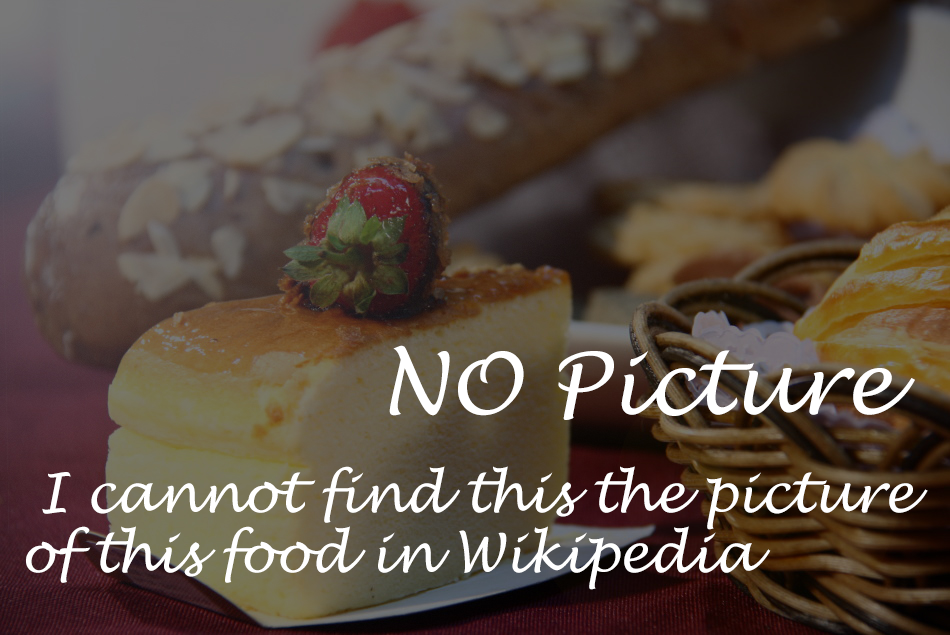
<style>
.page{position:relative;width:950px;height:635px}
.page>*{position:absolute;margin:0}
.t1{font:84.7px "LucidaHandwriting-Italic";color:#ffffff}
.t2{font:53px/6.7px "LucidaHandwriting-Italic";color:#ffffff}
</style>
<div class="page">
<p class="t1" style="left:389px;top:345px;width:526px;height:75px">NO Picture</p>
<p class="t2" style="left:26px;top:466px;width:902px;height:124px">I cannot find this the picture <br>  <br><br><br><br><br><br><br><br>of this food in Wikipedia</p>
</div>
